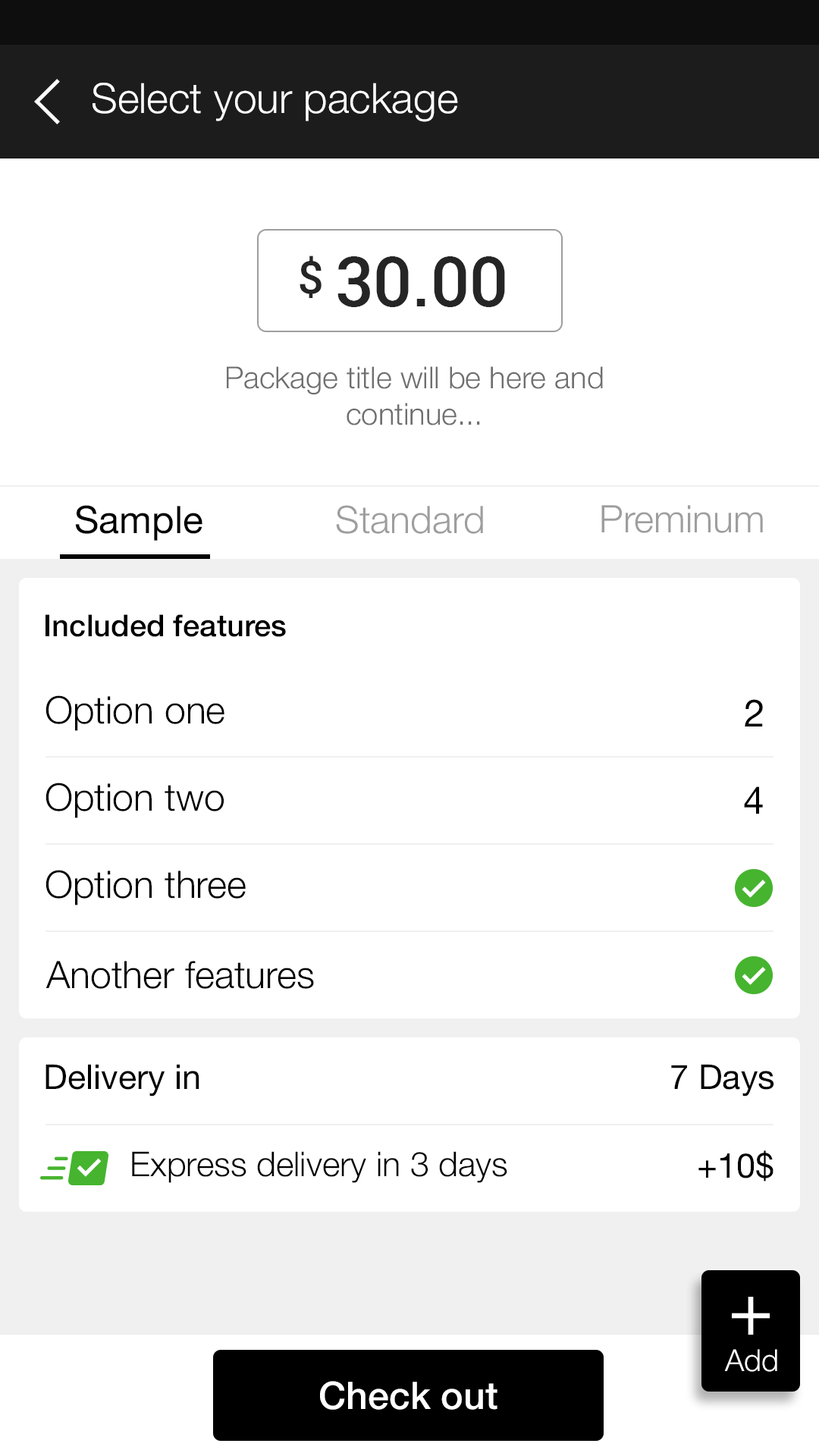
<style>
.page{position:relative;width:819px;height:1456px;background:#ffffff}
.page>*{position:absolute;margin:0}
.t1{font:41.7px "HelveticaNeue-Light";color:#ffffff}
.t2{font:45.5px "Roboto-Medium";color:#252525}
.t3{font:68.2px "Roboto-Medium";color:#252525}
.t4{font:30.3px "HelveticaNeue-Light";color:#6f6f6f}
.t5{font:37.9px "HelveticaNeue";color:#000000}
.t6{font:37.9px "HelveticaNeue-Light";color:#9e9e9e}
.t7{font:30.3px "HelveticaNeue-Medium";color:#000000}
.t8{font:37.9px "HelveticaNeue-Light";color:#000000}
.t9{font:34.1px "HelveticaNeue";color:#000000}
.t10{font:34.1px "HelveticaNeue-Light";color:#000000}
.t11{font:30.3px "HelveticaNeue-Light";color:#ffffff}
.t12{font:37.9px "HelveticaNeue-Medium";color:#ffffff}
</style>
<div class="page">
<p class="t1" style="left:93px;top:83px;width:365px;height:39px">Select your package</p>
<p class="t2" style="left:300px;top:256px;width:22px;height:42px">$</p>
<p class="t3" style="left:337px;top:256px;width:168px;height:51px">30.00</p>
<p class="t4" style="left:227px;top:366px;width:376px;height:59px;text-align:center">Package title will be here and<br>continue...</p>
<p class="t5" style="left:75px;top:505px;width:127px;height:36px">Sample</p>
<p class="t6" style="left:336px;top:505px;width:147px;height:29px">Standard</p>
<p class="t6" style="left:601px;top:505px;width:162px;height:28px">Preminum</p>
<p class="t7" style="left:45px;top:614px;width:241px;height:23px">Included features</p>
<p class="t8" style="left:45px;top:695px;width:179px;height:36px">Option one</p>
<p class="t5" style="left:745px;top:699px;width:18px;height:27px">2</p>
<p class="t8" style="left:45px;top:783px;width:179px;height:35px">Option two</p>
<p class="t5" style="left:744px;top:786px;width:19px;height:28px">4</p>
<p class="t8" style="left:45px;top:870px;width:201px;height:35px">Option three</p>
<p class="t8" style="left:45px;top:961px;width:269px;height:28px">Another features</p>
<p class="t9" style="left:45px;top:1064px;width:154px;height:33px">Delivery in</p>
<p class="t9" style="left:671px;top:1064px;width:103px;height:33px">7 Days</p>
<p class="t10" style="left:132px;top:1151px;width:375px;height:32px">Express delivery in 3 days</p>
<p class="t9" style="left:698px;top:1150px;width:75px;height:31px">+10$</p>
<p class="t11" style="left:724px;top:1349px;width:53px;height:23px">Add</p>
<p class="t12" style="left:320px;top:1381px;width:177px;height:29px">Check out</p>
</div>
